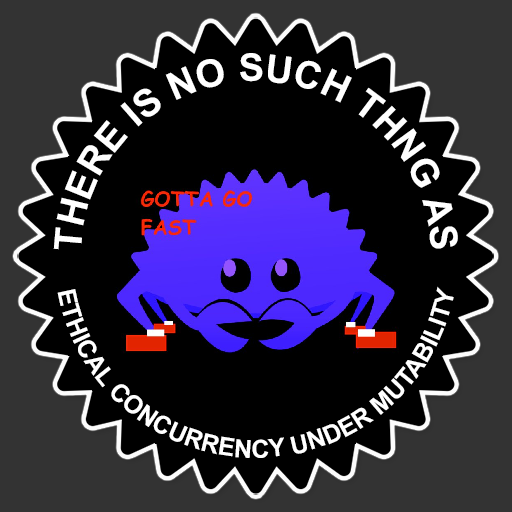
<style>
.page{position:relative;width:512px;height:512px;background:#000000}
.page>*{position:absolute;margin:0}
.t1{font:38px "Arial-BoldMT";color:#ffffff}
.t2{font:25px "Arial-BoldMT";color:#ffffff}
</style>
<div class="page">
<p class="t1" style="left:53px;top:53px;width:405px;height:197px;text-align:center">THERE IS NO SUCH THNG AS</p>
<p class="t2" style="left:57px;top:286px;width:397px;height:172px;text-align:center">ETHICAL CONCURRENCY UNDER MUTABILITY</p>
</div>
